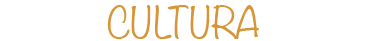
<style>
.page{position:relative;width:373px;height:41px;background:#ffffff}
.page>*{position:absolute;margin:0}
.t1{font:38.6px "Noteworthy-Light";color:#d79536}
</style>
<div class="page">
<p class="t1" style="left:107px;top:5px;width:152px;height:34px">CULTURA</p>
</div>
